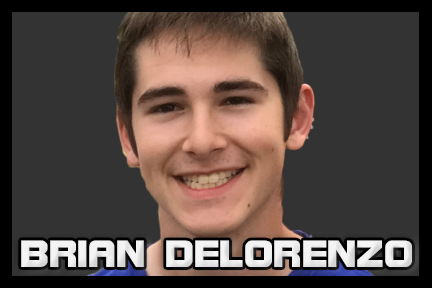
<style>
.page{position:relative;width:432px;height:288px;background:#333333}
.page>*{position:absolute;margin:0}
.t1{font:40.6px "BolsterBold";color:#f3f3f3}
.t2{font:41.7px "BolsterBold";color:#f3f3f3}
</style>
<div class="page">
<p class="t1" style="left:21px;top:240px;width:391px;height:27px"><span class="t2"><br></span>BRIAN DELORENZO</p>
</div>
